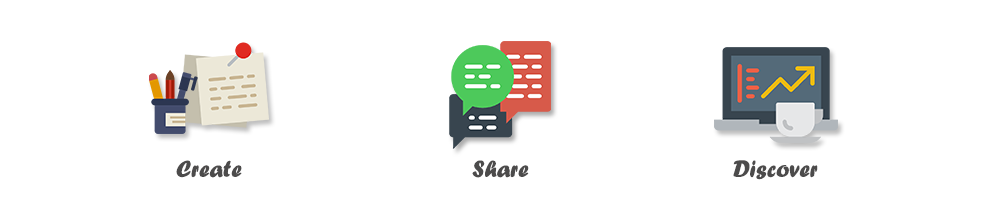
<style>
.page{position:relative;width:1000px;height:200px;background:#ffffff}
.page>*{position:absolute;margin:0}
.t1{font:24.4px "ForteMT";color:#4c4b4b}
</style>
<div class="page">
<p class="t1" style="left:176px;top:160px;width:66px;height:18px">Create</p>
<p class="t1" style="left:472px;top:160px;width:57px;height:18px">Share</p>
<p class="t1" style="left:733px;top:160px;width:85px;height:20px">Discover</p>
</div>
